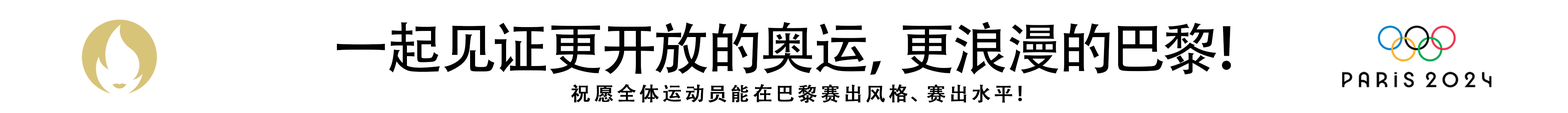
<style>
.page{position:relative;width:1568px;height:113px;background:#ffffff}
.page>*{position:absolute;margin:0}
.t1{font:56.3px "AdobeHeitiStd-Regular";color:#000000}
.t2{font:19.5px "AdobeHeitiStd-Regular";letter-spacing:0.2em;color:#000000;font-weight:bold}
</style>
<div class="page">
<p class="t1" style="left:337px;top:21px;width:894px;height:54px">一起见证更开放的奥运，更浪漫的巴黎！</p>
<p class="t2" style="left:571px;top:84px;width:451px;height:19px">祝愿全体运动员能在巴黎赛出风格、赛出水平！</p>
</div>
